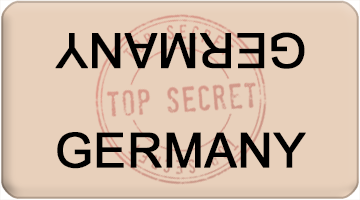
<style>
.page{position:relative;width:360px;height:200px;background:#e8d0bb}
.page>*{position:absolute;margin:0}
.t1{font:48px "ArialMT";color:#000000;font-weight:bold}
</style>
<div class="page">
<p class="t1" style="left:55px;top:32px;width:250px;height:37px;rotate:180deg">GERMANY</p>
<p class="t1" style="left:57px;top:132px;width:249px;height:37px">GERMANY</p>
</div>
